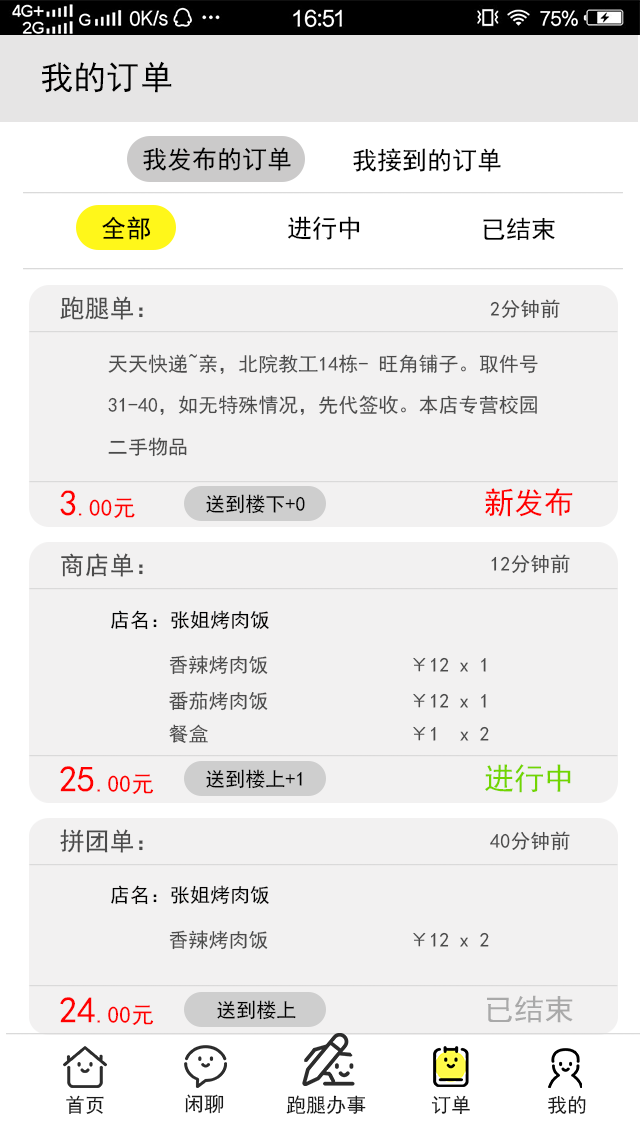
<style>
.page{position:relative;width:640px;height:1136px;background:#f2f1f1}
.page>*{position:absolute;margin:0}
.t1{font:33.3px "SimHei";letter-spacing:0.002em;color:#000000}
.t2{font:25px "SimHei";letter-spacing:0.002em;color:#000000}
.t3{font:25px "SimHei";letter-spacing:0.002em;color:#4b4b4b}
.t4{font:12px "SimHei";letter-spacing:0.002em;color:#4b4b4b}
.t5{font:20px/41.5px "SimHei";letter-spacing:0.002em;color:#4b4b4b}
.t6{font:23.3px "SimHei";letter-spacing:0.002em;color:#ff0000}
.t7{font:36.7px "SimHei";letter-spacing:0.002em;color:#ff0000}
.t8{font:20px "SimHei";letter-spacing:0.002em;color:#010101}
.t9{font:30px "SimHei";letter-spacing:0.002em;color:#ff0000}
.t10{font:20px "SimHei";letter-spacing:0.002em;color:#4b4b4b}
.t11{font:30px "SimHei";letter-spacing:0.002em;color:#73d500}
.t12{font:30px "SimHei";letter-spacing:0.002em;color:#a9a9a9}
.t13{font:12px "SimHei";letter-spacing:0.002em;color:#181818}
</style>
<div class="page">
<p class="t1" style="left:42px;top:61px;width:130px;height:32px">我的订单</p>
<p class="t2" style="left:143px;top:147px;width:148px;height:24px">我发布的订单</p>
<p class="t2" style="left:353px;top:148px;width:148px;height:24px">我接到的订单</p>
<p class="t2" style="left:102px;top:216px;width:49px;height:24px">全部</p>
<p class="t2" style="left:288px;top:216px;width:72px;height:24px">进行中</p>
<p class="t2" style="left:483px;top:217px;width:72px;height:24px">已结束</p>
<p class="t3" style="left:60px;top:296px;width:83px;height:24px">跑腿单：</p>
<p class="t4" style="left:490px;top:299px;width:70px;height:20px">2分钟前</p>
<p class="t5" style="left:108px;top:354px;width:430px;height:103px">天天快递~亲，北院教工14栋- 旺角铺子。取件号<br>31-40，如无特殊情况，先代签收。本店专营校园<br>二手物品</p>
<p class="t6" style="left:60px;top:490px;width:75px;height:28px"><span class="t7">3</span>.00元</p>
<p class="t8" style="left:206px;top:494px;width:99px;height:20px">送到楼下+0</p>
<p class="t9" style="left:485px;top:488px;width:88px;height:29px">新发布</p>
<p class="t3" style="left:61px;top:553px;width:82px;height:24px">商店单：</p>
<p class="t4" style="left:491px;top:554px;width:79px;height:20px">12分钟前</p>
<p class="t8" style="left:111px;top:610px;width:158px;height:20px">店名：张姐烤肉饭</p>
<p class="t10" style="left:169px;top:655px;width:317px;height:20px">香辣烤肉饭              ￥12 x 1</p>
<p class="t10" style="left:169px;top:691px;width:317px;height:20px">番茄烤肉饭              ￥12 x 1</p>
<p class="t10" style="left:169px;top:724px;width:320px;height:19px">餐盒                    ￥1  x 2</p>
<p class="t6" style="left:60px;top:766px;width:94px;height:28px"><span class="t7">25</span>.00元</p>
<p class="t8" style="left:206px;top:769px;width:96px;height:20px">送到楼上+1</p>
<p class="t11" style="left:485px;top:764px;width:86px;height:29px">进行中</p>
<p class="t3" style="left:60px;top:829px;width:83px;height:24px">拼团单：</p>
<p class="t4" style="left:490px;top:831px;width:80px;height:20px">40分钟前</p>
<p class="t8" style="left:111px;top:885px;width:158px;height:20px">店名：张姐烤肉饭</p>
<p class="t10" style="left:169px;top:930px;width:320px;height:20px">香辣烤肉饭              ￥12 x 2</p>
<p class="t6" style="left:60px;top:997px;width:94px;height:28px"><span class="t7">24</span>.00元</p>
<p class="t8" style="left:217px;top:1000px;width:79px;height:20px">送到楼上</p>
<p class="t12" style="left:487px;top:995px;width:86px;height:28px">已结束</p>
<p class="t13" style="left:66px;top:1095px;width:38px;height:19px">首页</p>
<p class="t13" style="left:185px;top:1094px;width:39px;height:20px">闲聊</p>
<p class="t13" style="left:286px;top:1095px;width:80px;height:20px">跑腿办事</p>
<p class="t13" style="left:431px;top:1095px;width:39px;height:20px">订单</p>
<p class="t13" style="left:548px;top:1095px;width:38px;height:19px">我的</p>
</div>
